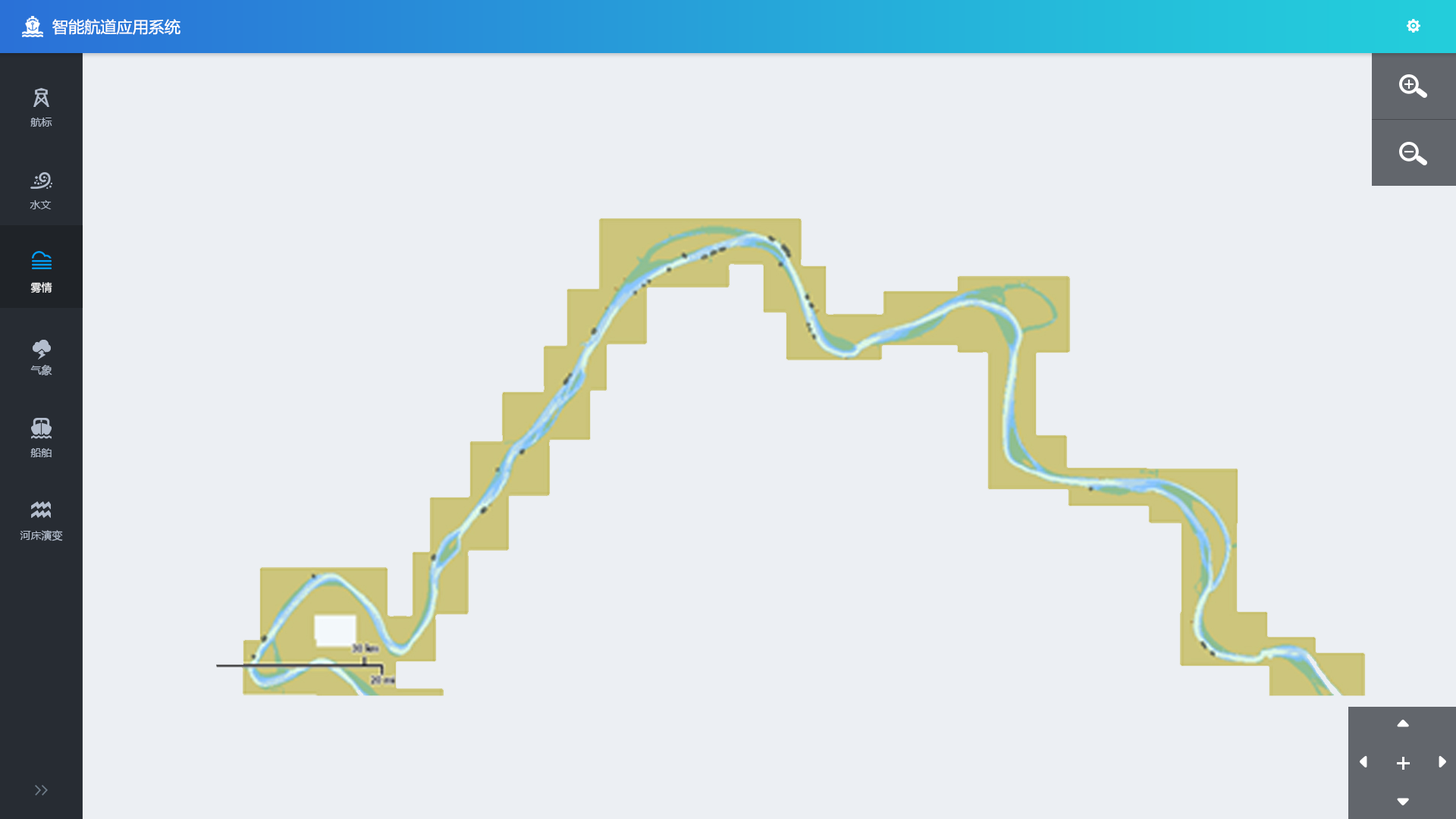
<style>
.page{position:relative;width:1456px;height:819px;background:#eceff3}
.page>*{position:absolute;margin:0}
.t1{font:15.7px "MicrosoftYaHei";color:#ffffff}
.t2{font:10.6px "MicrosoftYaHei";color:#b3bdcd}
.t3{font:10.6px "MicrosoftYaHei";color:#ffffff}
</style>
<div class="page">
<p class="t1" style="left:52px;top:19px;width:128px;height:16px">智能航道应用系统</p>
<p class="t2" style="left:30px;top:118px;width:22px;height:9px">航标</p>
<p class="t2" style="left:30px;top:200px;width:22px;height:9px">水文</p>
<p class="t3" style="left:30px;top:282px;width:22px;height:11px">雾情</p>
<p class="t2" style="left:30px;top:365px;width:22px;height:10px">气象</p>
<p class="t2" style="left:30px;top:448px;width:22px;height:9px">船舶</p>
<p class="t2" style="left:20px;top:530px;width:43px;height:11px">河床演变</p>
</div>
